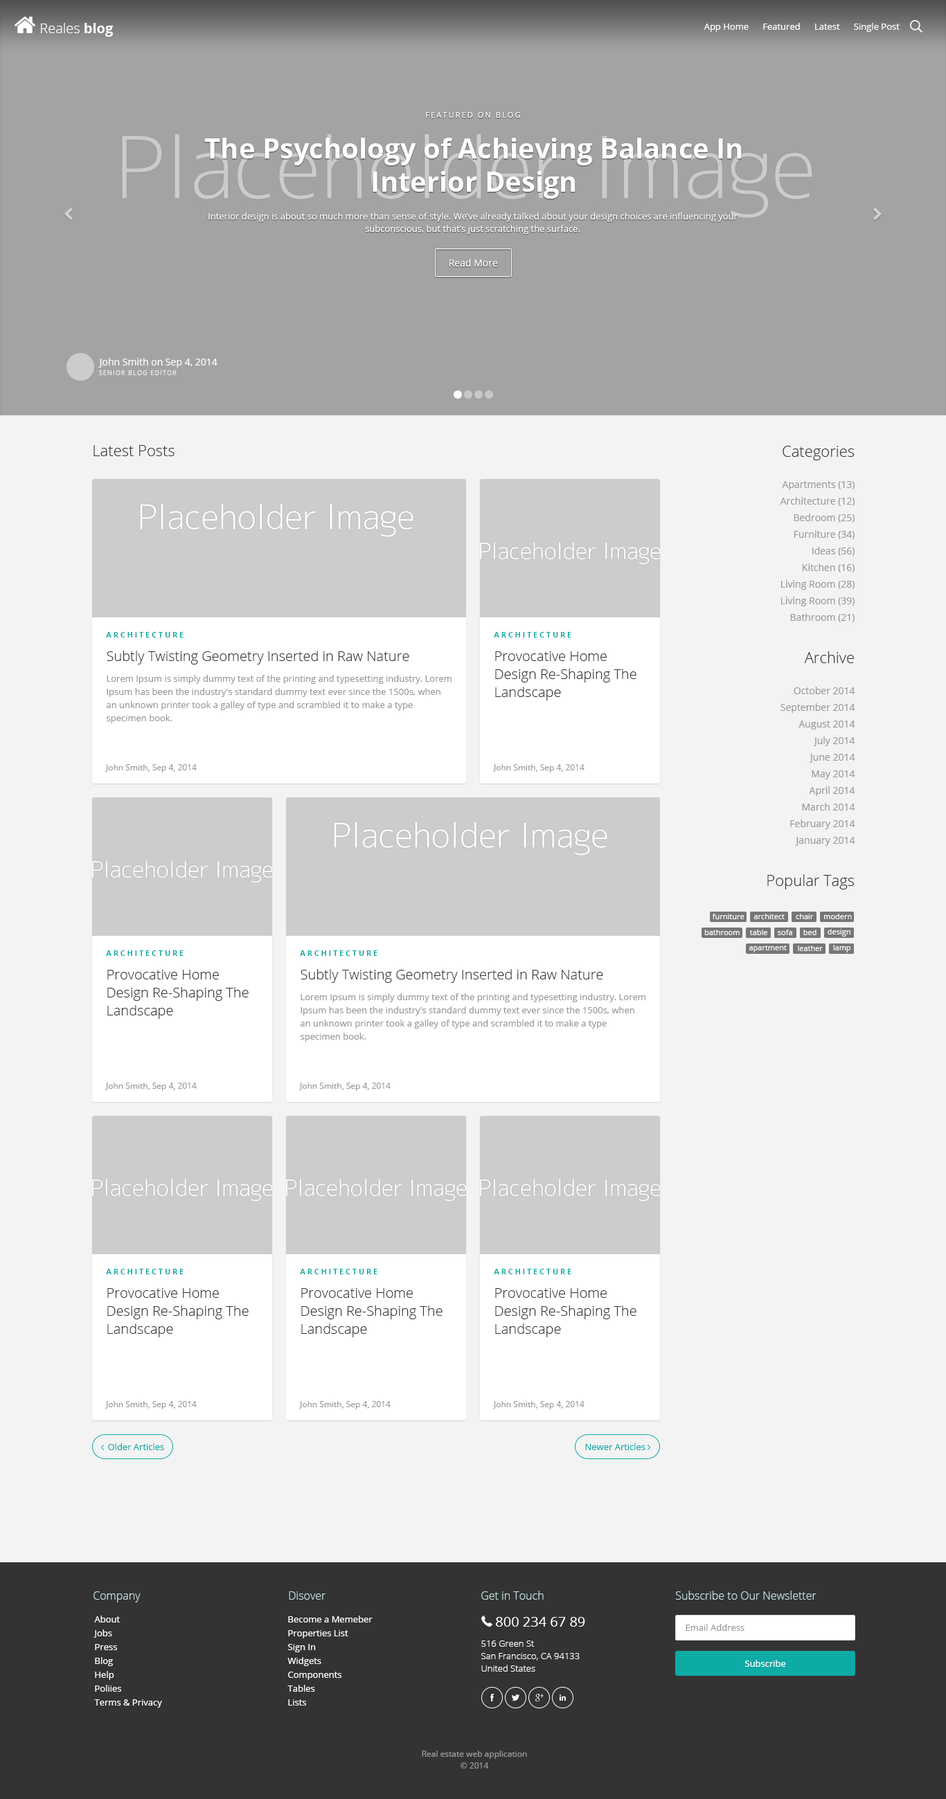
<style>
.page{position:relative;width:946px;height:1799px;background:#f3f3f3}
.page>*{position:absolute;margin:0}
.t1{font:13.8px "OpenSans-Light";color:#ffffff}
.t2{font:13.8px "OpenSans-Bold";color:#ffffff}
.t3{font:9px "OpenSans";color:#ffffff}
.t4{font:7.6px "OpenSans";letter-spacing:0.19em;color:#ffffff;text-transform:uppercase}
.t5{font:27.7px "OpenSans-Bold";color:#ffffff}
.t6{font:9px/12.5px "OpenSans";color:#ffffff}
.t7{font:9.7px "OpenSans";color:#ffffff}
.t8{font:6.2px "OpenSans";letter-spacing:0.13em;color:#ffffff;text-transform:uppercase}
.t9{font:15.2px "OpenSans-Light";color:#333333}
.t10{font:9.7px/16.6px "OpenSans";color:#999999}
.t11{font:7.6px "OpenSans-Bold";letter-spacing:0.25em;color:#0eaaa6;text-transform:uppercase}
.t12{font:13.8px "OpenSans-Light";color:#333333}
.t13{font:13.8px/18px "OpenSans-Light";color:#333333}
.t14{font:9px/13.2px "OpenSans";color:#999999}
.t15{font:8.3px "OpenSans";color:#999999}
.t16{font:7.6px "OpenSans";color:#ffffff}
.t17{font:9px "OpenSans";color:#0eaaa6}
.t18{font:11.1px "OpenSans-Light";color:#c6e4e3}
.t19{font:9px/13.8px "OpenSans";color:#ffffff}
.t20{font:13.8px "OpenSans";color:#ffffff}
.t21{font:9px "OpenSans";color:#999999}
.t22{font:9px/12.5px "OpenSans-Light";color:#ffffff}
.t23{font:8.3px/11.8px "OpenSans";color:#999999}
</style>
<div class="page">
<p class="t1" style="left:41px;top:23px;width:73px;height:14px">Reales <span class="t2">blog</span></p>
<p class="t3" style="left:703px;top:23px;width:196px;height:9px">App Home      Featured      Latest      Single Post</p>
<p class="t4" style="left:426px;top:112px;width:94px;height:6px">Featured on Blog</p>
<p class="t5" style="left:204px;top:138px;width:537px;height:61px;text-align:center">The Psychology of Achieving Balance In<br>Interior Design</p>
<p class="t6" style="left:208px;top:213px;width:529px;height:21px;text-align:center">Interior design is about so much more than sense of style. We’ve already talked about your design choices are influencing your<br>subconscious, but that’s just scratching the surface.</p>
<p class="t7" style="left:449px;top:259px;width:49px;height:8px">Read More</p>
<p class="t7" style="left:98px;top:358px;width:119px;height:10px">John Smith on Sep 4, 2014</p>
<p class="t8" style="left:99px;top:370px;width:78px;height:5px;opacity:0.8">Senior Blog Editor</p>
<p class="t9" style="left:93px;top:445px;width:81px;height:11px">Latest Posts</p>
<p class="t9" style="left:782px;top:446px;width:72px;height:14px">Categories</p>
<p class="t10" style="left:780px;top:481px;width:74px;height:141px;text-align:right">Apartments (13)<br>Architecture (12)<br>Bedroom (25)<br>Furniture (34)<br>Ideas (56)<br>Kitchen (16)<br>Living Room (28)<br>Living Room (39)<br>Bathroom (21)</p>
<p class="t11" style="left:106px;top:632px;width:77px;height:6px">Architecture</p>
<p class="t11" style="left:494px;top:632px;width:77px;height:6px">Architecture</p>
<p class="t12" style="left:107px;top:651px;width:302px;height:14px">Subtly Twisting Geometry Inserted in Raw Nature</p>
<p class="t13" style="left:495px;top:651px;width:141px;height:50px">Provocative Home<br>Design Re-Shaping The<br>Landscape</p>
<p class="t9" style="left:804px;top:651px;width:50px;height:12px">Archive</p>
<p class="t14" style="left:107px;top:675px;width:344px;height:48px">Lorem Ipsum is simply dummy text of the printing and typesetting industry. Lorem Ipsum has been the industry's standard dummy text ever since the 1500s, when an unknown printer took a galley of type and scrambled it to make a type specimen book.</p>
<p class="t10" style="left:780px;top:687px;width:75px;height:159px;text-align:right">October 2014<br>September 2014<br>August 2014<br>July 2014<br>June 2014<br>May 2014<br>April 2014<br>March 2014<br>February 2014<br>January 2014</p>
<p class="t15" style="left:105px;top:764px;width:92px;height:9px">John Smith, Sep 4, 2014</p>
<p class="t15" style="left:492px;top:764px;width:92px;height:9px">John Smith, Sep 4, 2014</p>
<p class="t9" style="left:767px;top:874px;width:87px;height:16px">Popular Tags</p>
<p class="t16" style="left:712px;top:914px;width:32px;height:5px">furniture</p>
<p class="t16" style="left:753px;top:914px;width:31px;height:5px">architect</p>
<p class="t16" style="left:795px;top:914px;width:18px;height:5px">chair</p>
<p class="t16" style="left:824px;top:914px;width:28px;height:5px">modern</p>
<p class="t16" style="left:704px;top:930px;width:35px;height:5px">bathroom</p>
<p class="t16" style="left:749px;top:930px;width:18px;height:5px">table</p>
<p class="t16" style="left:777px;top:930px;width:15px;height:5px">sofa</p>
<p class="t16" style="left:803px;top:930px;width:13px;height:5px">bed</p>
<p class="t16" style="left:827px;top:929px;width:23px;height:8px">design</p>
<p class="t11" style="left:106px;top:951px;width:77px;height:5px">Architecture</p>
<p class="t11" style="left:300px;top:951px;width:77px;height:5px">Architecture</p>
<p class="t16" style="left:748px;top:946px;width:38px;height:7px">apartment</p>
<p class="t16" style="left:798px;top:946px;width:24px;height:5px">leather</p>
<p class="t16" style="left:833px;top:945px;width:17px;height:8px">lamp</p>
<p class="t13" style="left:107px;top:970px;width:142px;height:49px">Provocative Home<br>Design Re-Shaping The<br>Landscape</p>
<p class="t12" style="left:300px;top:969px;width:303px;height:14px">Subtly Twisting Geometry Inserted in Raw Nature</p>
<p class="t14" style="left:300px;top:993px;width:345px;height:49px">Lorem Ipsum is simply dummy text of the printing and typesetting industry. Lorem Ipsum has been the industry's standard dummy text ever since the 1500s, when an unknown printer took a galley of type and scrambled it to make a type specimen book.</p>
<p class="t15" style="left:105px;top:1083px;width:92px;height:8px">John Smith, Sep 4, 2014</p>
<p class="t15" style="left:298px;top:1083px;width:92px;height:8px">John Smith, Sep 4, 2014</p>
<p class="t11" style="left:106px;top:1269px;width:77px;height:6px">Architecture</p>
<p class="t11" style="left:300px;top:1269px;width:77px;height:6px">Architecture</p>
<p class="t11" style="left:494px;top:1269px;width:77px;height:6px">Architecture</p>
<p class="t13" style="left:107px;top:1288px;width:142px;height:50px">Provocative Home<br>Design Re-Shaping The<br>Landscape</p>
<p class="t13" style="left:301px;top:1288px;width:141px;height:50px">Provocative Home<br>Design Re-Shaping The<br>Landscape</p>
<p class="t13" style="left:495px;top:1288px;width:141px;height:50px">Provocative Home<br>Design Re-Shaping The<br>Landscape</p>
<p class="t15" style="left:105px;top:1401px;width:92px;height:9px">John Smith, Sep 4, 2014</p>
<p class="t15" style="left:298px;top:1401px;width:92px;height:9px">John Smith, Sep 4, 2014</p>
<p class="t15" style="left:492px;top:1401px;width:92px;height:9px">John Smith, Sep 4, 2014</p>
<p class="t17" style="left:108px;top:1443px;width:56px;height:7px">Older Articles</p>
<p class="t17" style="left:585px;top:1443px;width:60px;height:7px">Newer Articles</p>
<p class="t18" style="left:93px;top:1592px;width:48px;height:11px">Company</p>
<p class="t18" style="left:289px;top:1592px;width:36px;height:8px">Disover</p>
<p class="t18" style="left:481px;top:1591px;width:62px;height:9px">Get in Touch</p>
<p class="t18" style="left:676px;top:1591px;width:140px;height:9px">Subscribe to Our Newsletter</p>
<p class="t19" style="left:93px;top:1616px;width:69px;height:92px">About<br>Jobs<br>Press<br>Blog<br>Help<br>Poliies<br>Terms &amp; Privacy</p>
<p class="t19" style="left:287px;top:1616px;width:85px;height:90px">Become a Memeber<br>Properties List<br>Sign In<br>Widgets<br>Components<br>Tables<br>Lists</p>
<p class="t20" style="left:496px;top:1617px;width:89px;height:10px">800 234 67 89</p>
<p class="t21" style="left:685px;top:1624px;width:59px;height:7px">Email Address</p>
<p class="t22" style="left:481px;top:1641px;width:98px;height:31px">516 Green St<br>San Francisco, CA 94133<br>United States</p>
<p class="t3" style="left:745px;top:1660px;width:41px;height:7px">Subscribe</p>
<p class="t23" style="left:422px;top:1751px;width:105px;height:18px;text-align:center">Real estate web application<br>© 2014</p>
</div>
